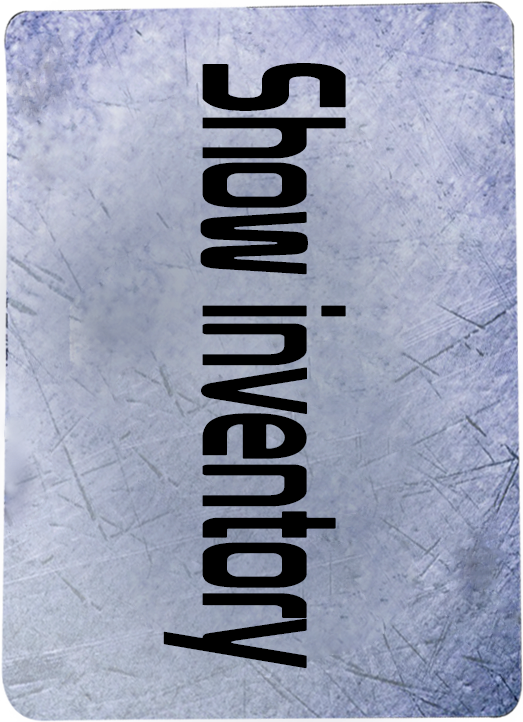
<style>
.page{position:relative;width:523px;height:722px}
.page>*{position:absolute;margin:0}
.t1{font:199.7px "Prototype";color:#000000;scale:0.44 1}
</style>
<div class="page">
<p class="t1" style="left:163px;top:63px;width:183px;height:605px;rotate:90deg">Show inventory</p>
</div>
